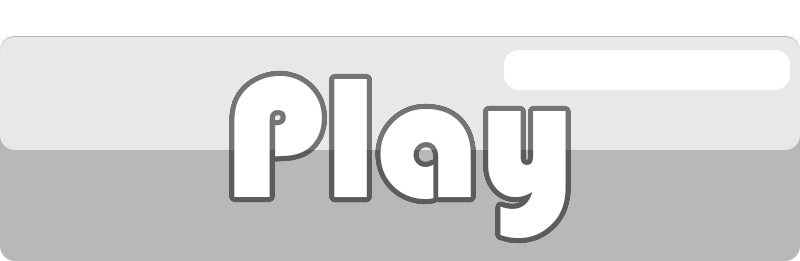
<style>
.page{position:relative;width:800px;height:261px;background:#b8b8b8}
.page>*{position:absolute;margin:0}
.t1{font:177px "Bauhaus93";color:#ffffff}
</style>
<div class="page">
<p class="t1" style="left:234px;top:76px;width:332px;height:162px">Play</p>
</div>
